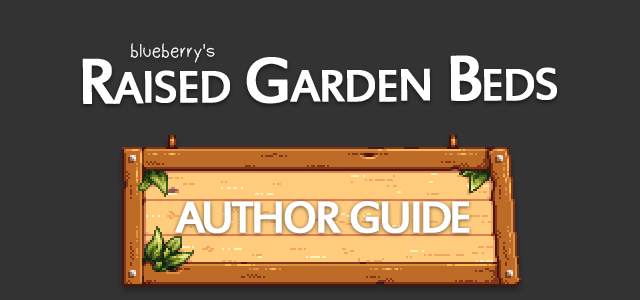
<style>
.page{position:relative;width:640px;height:300px;background:#333333}
.page>*{position:absolute;margin:0}
.t1{font:20px "Dudu_Calligraphy";color:#ffffff}
.t2{font:70px "EstrangeloEdessa";letter-spacing:-0.05em;color:#ffffff;font-variant:small-caps;font-weight:bold}
.t3{font:69px "EstrangeloEdessa";letter-spacing:-0.075em;color:#ffffff;font-variant:small-caps;font-weight:bold}
</style>
<div class="page">
<p class="t1" style="left:130px;top:43px;width:85px;height:20px">blueberry's</p>
<p class="t2" style="left:82px;top:55px;width:475px;height:49px">Raised Garden Beds</p>
<p class="t3" style="left:175px;top:201px;width:295px;height:33px">author guide</p>
</div>
